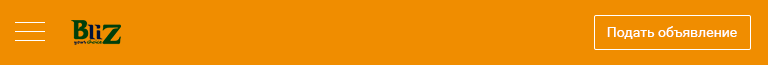
<style>
.page{position:relative;width:768px;height:65px;background:#f08d00}
.page>*{position:absolute;margin:0}
.t1{font:14px "Roboto-Regular";color:#ffffff}
</style>
<div class="page">
<p class="t1" style="left:607px;top:26px;width:130px;height:13px">Подать объявление</p>
</div>
